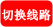
<style>
.page{position:relative;width:53px;height:27px;background:#fa0303}
.page>*{position:absolute;margin:0}
.t1{font:12px "SimSun";color:#ffffff;font-weight:bold}
</style>
<div class="page">
<p class="t1" style="left:1px;top:9px;width:50px;height:12px">切换线路</p>
</div>
